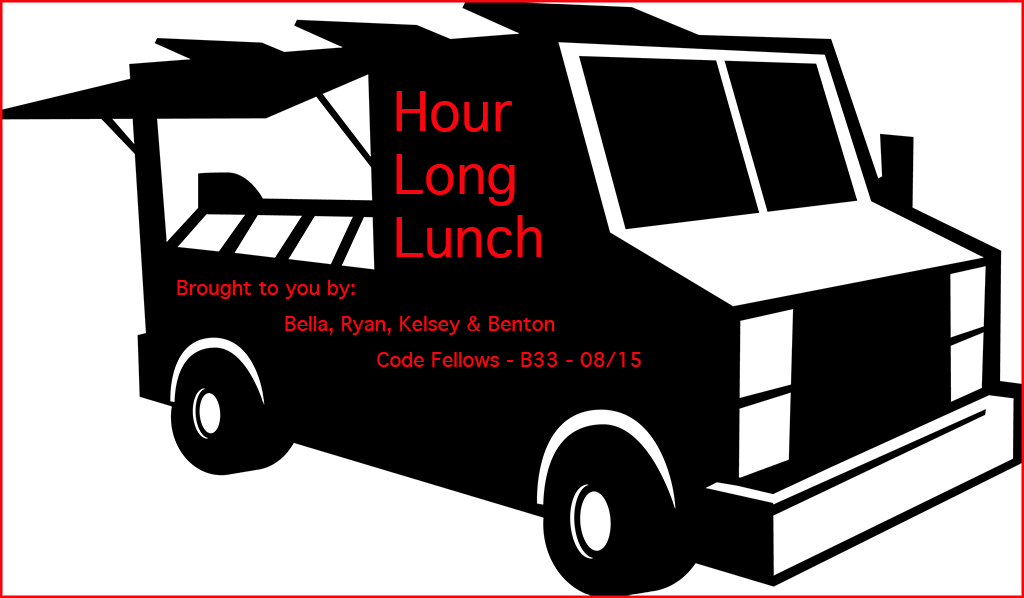
<style>
.page{position:relative;width:1024px;height:598px;background:#ffffff}
.page>*{position:absolute;margin:0}
.t1{font:52.5px "Geneva";color:#f90510}
.t2{font:19.7px "Geneva";color:#f90510}
</style>
<div class="page">
<p class="t1" style="left:396px;top:91px;width:146px;height:167px">Hour<br>Long <br>Lunch</p>
<p class="t2" style="left:177px;top:280px;width:178px;height:19px">Brought to you by:</p>
<p class="t2" style="left:285px;top:316px;width:270px;height:19px">Bella, Ryan, Kelsey &amp; Benton</p>
<p class="t2" style="left:377px;top:352px;width:264px;height:15px">Code Fellows - B33 - 08/15</p>
</div>
